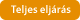
<style>
.page{position:relative;width:80px;height:20px;background:#e68d00}
.page>*{position:absolute;margin:0}
.t1{font:11px "MyriadPro-Semibold";color:#ffffff}
</style>
<div class="page">
<p class="t1" style="left:11px;top:5px;width:60px;height:11px">Teljes eljárás</p>
</div>
